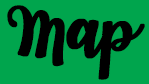
<style>
.page{position:relative;width:149px;height:84px;background:#00a54d}
.page>*{position:absolute;margin:0}
.t1{font:72px "SOV_Thanamas";letter-spacing:-0.025em;color:#000000;font-weight:bold}
</style>
<div class="page">
<p class="t1" style="left:7px;top:5px;width:138px;height:75px">Map</p>
</div>
